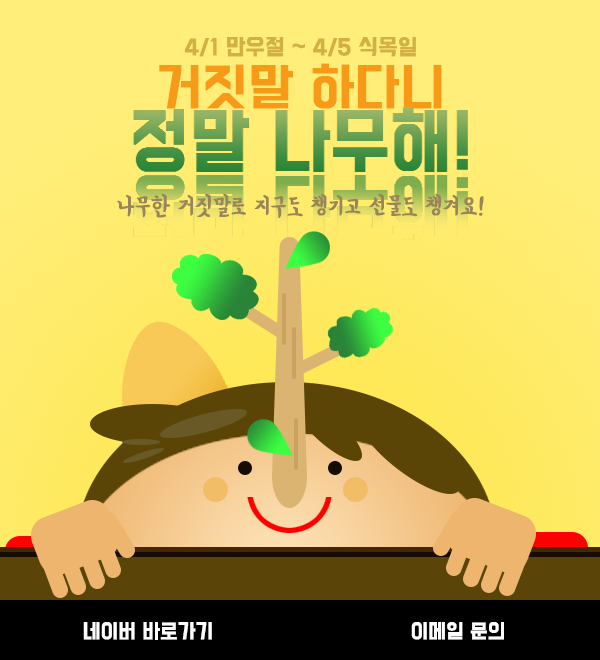
<style>
.page{position:relative;width:600px;height:660px}
.page>*{position:absolute;margin:0}
.t1{font:20px "BMDoHyeon";color:#d2b044;font-weight:bold}
.t2{font:46px/48px "BMDoHyeon";color:#f79a17;font-weight:bold}
.t3{font:24px "BMYEONSUNG";color:#9a855a;font-weight:bold}
.t4{font:18px "BMDoHyeon";color:#ffffff;font-weight:bold}
</style>
<div class="page">
<p class="t1" style="left:159px;top:37px;width:283px;height:72px;text-align:center">4/1 만우절 ~ 4/5 식목일<br><span class="t2">거짓말 하다니</span></p>
<p class="t3" style="left:117px;top:193px;width:367px;height:25px">나무한 거짓말로 지구도 챙기고 선물도 챙겨요!</p>
<p class="t4" style="left:83px;top:622px;width:129px;height:18px">네이버 바로가기</p>
<p class="t4" style="left:411px;top:622px;width:93px;height:18px">이메일 문의</p>
</div>
